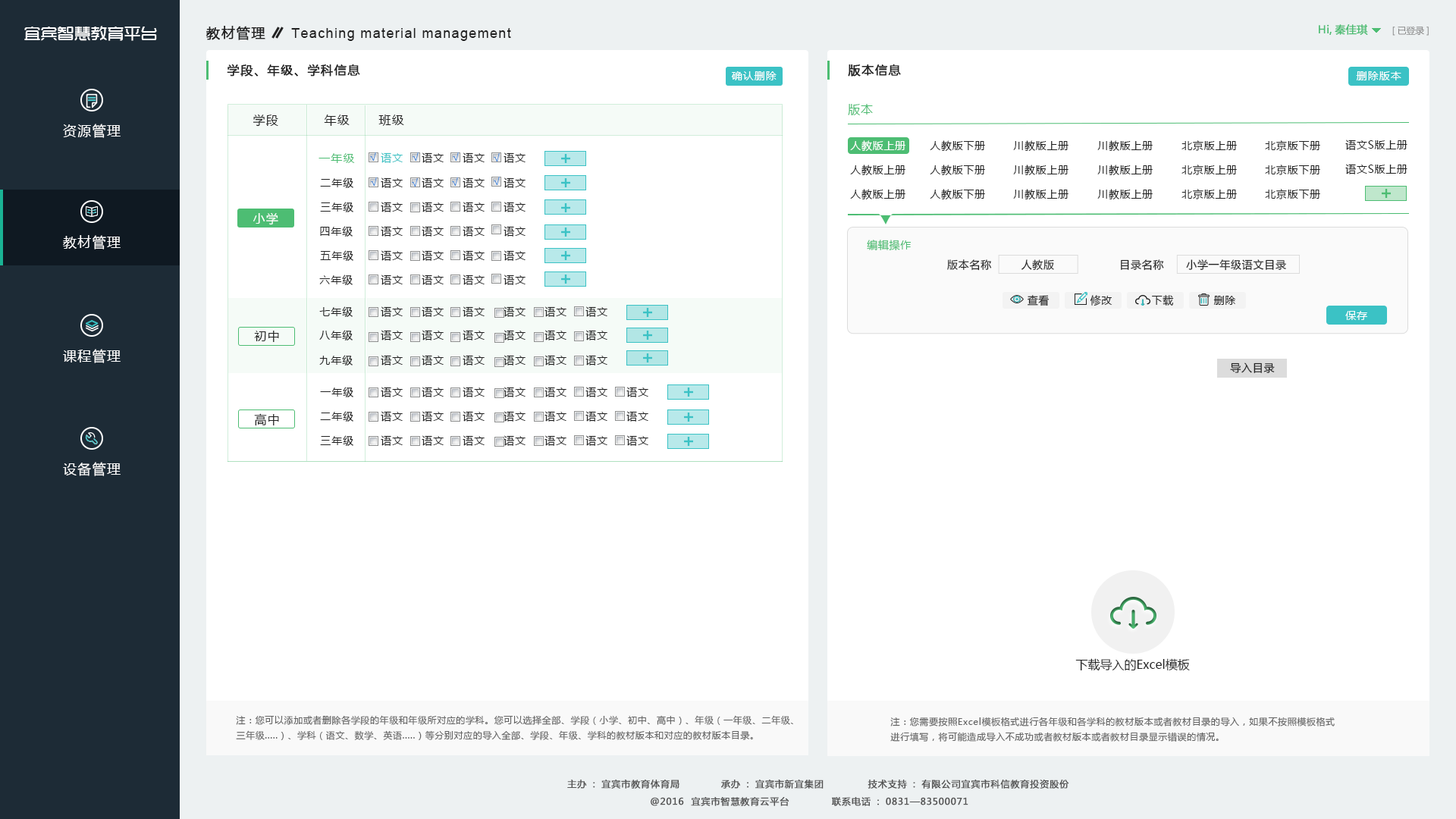
<style>
.page{position:relative;width:1456px;height:819px;background:#ffffff}
.page>*{position:absolute;margin:0}
.t1{font:16.7px "TRENDS";color:#ffffff}
.t2{font:13.6px "MicrosoftYaHei";letter-spacing:0.075em;color:#222222;font-weight:bold}
.t3{font:13.6px "ArialMT";letter-spacing:0.075em;color:#222222}
.t4{font:10.6px "MicrosoftYaHei";color:#4dbd73;font-weight:bold}
.t5{font:9.1px "MicrosoftYaHei";letter-spacing:-0.01em;color:#868686}
.t6{font:12.1px "MicrosoftYaHei";letter-spacing:0.075em;color:#222222;font-weight:bold}
.t7{font:10.6px "MicrosoftYaHei";letter-spacing:0.075em;color:#ffffff}
.t8{font:12.1px "MicrosoftYaHei";letter-spacing:0.075em;color:#222222}
.t9{font:12.1px "MicrosoftYaHei";letter-spacing:0.05em;color:#4dbd73}
.t10{font:13.6px "MicrosoftYaHei";letter-spacing:0.075em;color:#ffffff}
.t11{font:10.6px "MicrosoftYaHei";letter-spacing:0.05em;color:#ffffff}
.t12{font:10.6px "MicrosoftYaHei";letter-spacing:0.05em;color:#222222}
.t13{font:11.4px "MicrosoftYaHei";letter-spacing:0.075em;color:#4dbd73}
.t14{font:10.6px "MicrosoftYaHei";letter-spacing:0.075em;color:#4889d9}
.t15{font:10.6px "MicrosoftYaHei";letter-spacing:0.075em;color:#3bc2c5}
.t16{font:10.6px "MicrosoftYaHei";letter-spacing:0.075em;color:#222222}
.t17{font:12.1px "MicrosoftYaHei";letter-spacing:0.075em;color:#ffffff}
.t18{font:10.6px "MicrosoftYaHei";letter-spacing:0.05em;color:#4dbd73}
.t19{font:12.1px "MicrosoftYaHei";color:#222222}
.t20{font:9.1px/15.2px "MicrosoftYaHei";letter-spacing:0.05em;color:#646464}
.t21{font:9.1px "MicrosoftYaHei";letter-spacing:0.05em;color:#545454;font-weight:bold}
</style>
<div class="page">
<p class="t1" style="left:24px;top:26px;width:133px;height:15px">宜宾智慧教育平台</p>
<p class="t2" style="left:206px;top:26px;width:59px;height:14px">教材管理</p>
<p class="t3" style="left:291px;top:28px;width:220px;height:13px">Teaching material management</p>
<p class="t4" style="left:1319px;top:24px;width:49px;height:11px">Hi,秦佳琪</p>
<p class="t5" style="left:1392px;top:26px;width:37px;height:10px">[已登录]</p>
<p class="t6" style="left:227px;top:64px;width:133px;height:13px">学段、年级、学科信息</p>
<p class="t6" style="left:848px;top:64px;width:53px;height:13px">版本信息</p>
<p class="t7" style="left:731px;top:71px;width:46px;height:9px">确认删除</p>
<p class="t7" style="left:1356px;top:71px;width:45px;height:9px">删除版本</p>
<p class="t8" style="left:253px;top:114px;width:25px;height:13px">学段</p>
<p class="t9" style="left:848px;top:104px;width:25px;height:11px">版本</p>
<p class="t10" style="left:63px;top:124px;width:58px;height:14px">资源管理</p>
<p class="t8" style="left:324px;top:115px;width:26px;height:11px">年级</p>
<p class="t8" style="left:378px;top:115px;width:26px;height:11px">班级</p>
<p class="t11" style="left:850px;top:140px;width:55px;height:11px">人教版上册</p>
<p class="t12" style="left:930px;top:140px;width:55px;height:11px">人教版下册</p>
<p class="t12" style="left:1013px;top:140px;width:55px;height:11px">川教版上册</p>
<p class="t12" style="left:1097px;top:140px;width:56px;height:11px">川教版上册</p>
<p class="t12" style="left:1181px;top:140px;width:56px;height:11px">北京版上册</p>
<p class="t12" style="left:1265px;top:140px;width:55px;height:11px">北京版下册</p>
<p class="t12" style="left:1345px;top:140px;width:62px;height:10px">语文S版上册</p>
<p class="t13" style="left:318px;top:153px;width:37px;height:10px">一年级</p>
<p class="t14" style="left:370px;top:152px;width:6px;height:9px">√</p>
<p class="t15" style="left:381px;top:152px;width:22px;height:11px">语文</p>
<p class="t14" style="left:413px;top:152px;width:6px;height:9px">√</p>
<p class="t16" style="left:422px;top:152px;width:22px;height:11px">语文</p>
<p class="t14" style="left:453px;top:152px;width:6px;height:9px">√</p>
<p class="t16" style="left:463px;top:152px;width:22px;height:11px">语文</p>
<p class="t14" style="left:494px;top:153px;width:6px;height:9px">√</p>
<p class="t16" style="left:504px;top:152px;width:22px;height:11px">语文</p>
<p class="t12" style="left:850px;top:165px;width:55px;height:10px">人教版上册</p>
<p class="t12" style="left:930px;top:165px;width:55px;height:10px">人教版下册</p>
<p class="t12" style="left:1013px;top:165px;width:55px;height:10px">川教版上册</p>
<p class="t12" style="left:1097px;top:165px;width:56px;height:10px">川教版上册</p>
<p class="t12" style="left:1181px;top:165px;width:56px;height:10px">北京版上册</p>
<p class="t12" style="left:1265px;top:165px;width:55px;height:10px">北京版下册</p>
<p class="t12" style="left:1345px;top:164px;width:62px;height:10px">语文S版上册</p>
<p class="t16" style="left:320px;top:177px;width:33px;height:11px">二年级</p>
<p class="t14" style="left:371px;top:177px;width:6px;height:9px">√</p>
<p class="t16" style="left:381px;top:177px;width:22px;height:11px">语文</p>
<p class="t14" style="left:412px;top:178px;width:6px;height:9px">√</p>
<p class="t16" style="left:422px;top:177px;width:22px;height:11px">语文</p>
<p class="t14" style="left:452px;top:177px;width:6px;height:9px">√</p>
<p class="t16" style="left:463px;top:177px;width:22px;height:11px">语文</p>
<p class="t14" style="left:494px;top:177px;width:6px;height:8px">√</p>
<p class="t16" style="left:504px;top:177px;width:22px;height:11px">语文</p>
<p class="t12" style="left:850px;top:189px;width:55px;height:10px">人教版上册</p>
<p class="t12" style="left:930px;top:189px;width:55px;height:10px">人教版下册</p>
<p class="t12" style="left:1013px;top:189px;width:55px;height:10px">川教版上册</p>
<p class="t12" style="left:1097px;top:189px;width:56px;height:10px">川教版上册</p>
<p class="t12" style="left:1181px;top:189px;width:56px;height:10px">北京版上册</p>
<p class="t12" style="left:1265px;top:189px;width:55px;height:10px">北京版下册</p>
<p class="t16" style="left:320px;top:202px;width:33px;height:10px">三年级</p>
<p class="t16" style="left:381px;top:202px;width:22px;height:10px">语文</p>
<p class="t16" style="left:422px;top:202px;width:22px;height:10px">语文</p>
<p class="t16" style="left:463px;top:202px;width:22px;height:10px">语文</p>
<p class="t16" style="left:504px;top:202px;width:22px;height:10px">语文</p>
<p class="t17" style="left:253px;top:212px;width:25px;height:13px">小学</p>
<p class="t16" style="left:320px;top:226px;width:33px;height:11px">四年级</p>
<p class="t16" style="left:381px;top:226px;width:22px;height:11px">语文</p>
<p class="t16" style="left:422px;top:226px;width:22px;height:11px">语文</p>
<p class="t16" style="left:463px;top:226px;width:22px;height:11px">语文</p>
<p class="t16" style="left:504px;top:226px;width:22px;height:11px">语文</p>
<p class="t10" style="left:63px;top:235px;width:58px;height:14px">教材管理</p>
<p class="t18" style="left:867px;top:240px;width:45px;height:11px">编辑操作</p>
<p class="t16" style="left:320px;top:250px;width:33px;height:11px">五年级</p>
<p class="t16" style="left:381px;top:250px;width:22px;height:11px">语文</p>
<p class="t16" style="left:422px;top:250px;width:22px;height:11px">语文</p>
<p class="t16" style="left:463px;top:250px;width:22px;height:11px">语文</p>
<p class="t16" style="left:504px;top:250px;width:22px;height:11px">语文</p>
<p class="t12" style="left:947px;top:259px;width:107px;height:12px">版本名称        人教版</p>
<p class="t12" style="left:1121px;top:259px;width:165px;height:12px">目录名称      小学一年级语文目录</p>
<p class="t16" style="left:319px;top:275px;width:34px;height:10px">六年级</p>
<p class="t16" style="left:381px;top:275px;width:22px;height:10px">语文</p>
<p class="t16" style="left:422px;top:275px;width:22px;height:10px">语文</p>
<p class="t16" style="left:463px;top:275px;width:22px;height:10px">语文</p>
<p class="t16" style="left:504px;top:275px;width:22px;height:10px">语文</p>
<p class="t12" style="left:1028px;top:295px;width:22px;height:11px">查看</p>
<p class="t12" style="left:1090px;top:295px;width:22px;height:11px">修改</p>
<p class="t12" style="left:1152px;top:295px;width:22px;height:11px">下载</p>
<p class="t12" style="left:1213px;top:296px;width:23px;height:9px">删除</p>
<p class="t16" style="left:319px;top:306px;width:34px;height:11px">七年级</p>
<p class="t16" style="left:381px;top:306px;width:22px;height:11px">语文</p>
<p class="t16" style="left:422px;top:306px;width:22px;height:11px">语文</p>
<p class="t16" style="left:463px;top:306px;width:22px;height:11px">语文</p>
<p class="t16" style="left:504px;top:306px;width:22px;height:11px">语文</p>
<p class="t16" style="left:544px;top:306px;width:22px;height:11px">语文</p>
<p class="t16" style="left:585px;top:306px;width:22px;height:11px">语文</p>
<p class="t11" style="left:1345px;top:311px;width:22px;height:9px">保存</p>
<p class="t16" style="left:319px;top:330px;width:34px;height:10px">八年级</p>
<p class="t16" style="left:381px;top:330px;width:22px;height:10px">语文</p>
<p class="t16" style="left:422px;top:330px;width:22px;height:10px">语文</p>
<p class="t16" style="left:463px;top:330px;width:22px;height:10px">语文</p>
<p class="t16" style="left:504px;top:330px;width:22px;height:10px">语文</p>
<p class="t16" style="left:544px;top:330px;width:22px;height:10px">语文</p>
<p class="t16" style="left:585px;top:330px;width:22px;height:10px">语文</p>
<p class="t8" style="left:254px;top:331px;width:25px;height:11px">初中</p>
<p class="t10" style="left:63px;top:349px;width:58px;height:14px">课程管理</p>
<p class="t16" style="left:319px;top:355px;width:34px;height:11px">九年级</p>
<p class="t16" style="left:381px;top:355px;width:22px;height:11px">语文</p>
<p class="t16" style="left:422px;top:355px;width:22px;height:11px">语文</p>
<p class="t16" style="left:463px;top:355px;width:22px;height:11px">语文</p>
<p class="t16" style="left:504px;top:355px;width:22px;height:11px">语文</p>
<p class="t16" style="left:544px;top:355px;width:22px;height:11px">语文</p>
<p class="t16" style="left:585px;top:355px;width:22px;height:11px">语文</p>
<p class="t12" style="left:1230px;top:362px;width:45px;height:11px">导入目录</p>
<p class="t16" style="left:320px;top:387px;width:33px;height:10px">一年级</p>
<p class="t16" style="left:381px;top:387px;width:22px;height:10px">语文</p>
<p class="t16" style="left:422px;top:387px;width:22px;height:10px">语文</p>
<p class="t16" style="left:463px;top:387px;width:22px;height:10px">语文</p>
<p class="t16" style="left:504px;top:387px;width:22px;height:10px">语文</p>
<p class="t16" style="left:544px;top:387px;width:22px;height:10px">语文</p>
<p class="t16" style="left:585px;top:387px;width:22px;height:10px">语文</p>
<p class="t16" style="left:626px;top:387px;width:22px;height:10px">语文</p>
<p class="t8" style="left:254px;top:413px;width:25px;height:13px">高中</p>
<p class="t16" style="left:320px;top:411px;width:33px;height:11px">二年级</p>
<p class="t16" style="left:381px;top:411px;width:22px;height:11px">语文</p>
<p class="t16" style="left:422px;top:411px;width:22px;height:11px">语文</p>
<p class="t16" style="left:463px;top:411px;width:22px;height:11px">语文</p>
<p class="t16" style="left:504px;top:411px;width:22px;height:11px">语文</p>
<p class="t16" style="left:544px;top:411px;width:22px;height:11px">语文</p>
<p class="t16" style="left:585px;top:411px;width:22px;height:11px">语文</p>
<p class="t16" style="left:626px;top:411px;width:22px;height:11px">语文</p>
<p class="t16" style="left:320px;top:435px;width:33px;height:11px">三年级</p>
<p class="t16" style="left:381px;top:435px;width:22px;height:11px">语文</p>
<p class="t16" style="left:422px;top:435px;width:22px;height:11px">语文</p>
<p class="t16" style="left:463px;top:435px;width:22px;height:11px">语文</p>
<p class="t16" style="left:504px;top:435px;width:22px;height:11px">语文</p>
<p class="t16" style="left:544px;top:435px;width:22px;height:11px">语文</p>
<p class="t16" style="left:585px;top:435px;width:22px;height:11px">语文</p>
<p class="t16" style="left:626px;top:435px;width:22px;height:11px">语文</p>
<p class="t10" style="left:63px;top:462px;width:58px;height:14px">设备管理</p>
<p class="t19" style="left:1075px;top:658px;width:115px;height:13px">下载导入的Excel模板</p>
<p class="t20" style="left:236px;top:715px;width:557px;height:25px">注：您可以添加或者删除各学段的年级和年级所对应的学科。您可以选择全部、学段（小学、初中、高中）、年级（一年级、二年级、<br>三年级.....）、学科（语文、数学、英语.....）等分别对应的导入全部、学段、年级、学科的教材版本和对应的教材版本目录。</p>
<p class="t20" style="left:890px;top:717px;width:445px;height:25px">注：您需要按照Excel模板格式进行各年级和各学科的教材版本或者教材目录的导入，如果不按照模板格式<br>进行填写，将可能造成导入不成功或者教材版本或者教材目录显示错误的情况。</p>
<p class="t21" style="left:567px;top:780px;width:112px;height:9px">主办：宜宾市教育体育局</p>
<p class="t21" style="left:721px;top:780px;width:103px;height:9px">承办：宜宾市新宜集团</p>
<p class="t21" style="left:868px;top:780px;width:201px;height:9px">技术支持：有限公司宜宾市科信教育投资股份</p>
<p class="t21" style="left:651px;top:797px;width:138px;height:9px">@2016  宜宾市智慧教育云平台</p>
<p class="t21" style="left:832px;top:797px;width:136px;height:9px">联系电话：0831—83500071</p>
</div>
